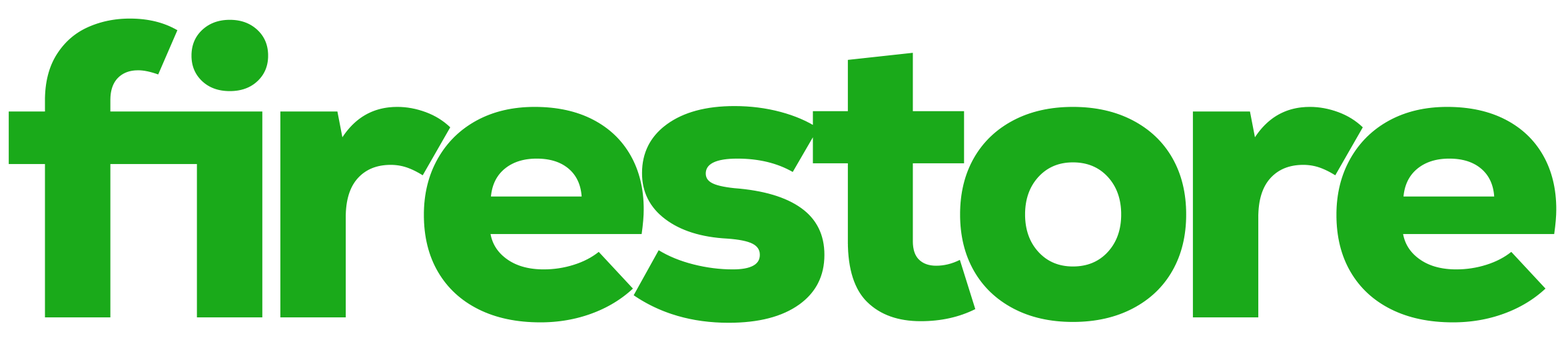
<style>
.page{position:relative;width:1568px;height:352px;background:#ffffff}
.page>*{position:absolute;margin:0}
.t1{font:416.3px "Nexa-Heavy";letter-spacing:-0.075em;color:#1aaa1a}
</style>
<div class="page">
<p class="t1" style="left:9px;top:18px;width:1548px;height:305px">firestore</p>
</div>
